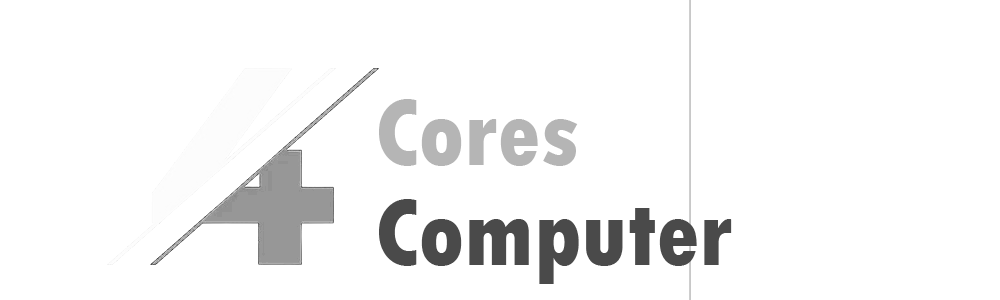
<style>
.page{position:relative;width:1000px;height:300px;background:#ffffff}
.page>*{position:absolute;margin:0}
.t1{font:100px/100px "TwCenMT-CondensedExtraBold"}
</style>
<div class="page">
<p class="t1" style="left:379px;top:99px;width:353px;height:185px">Cores <br>Computer</p>
</div>
